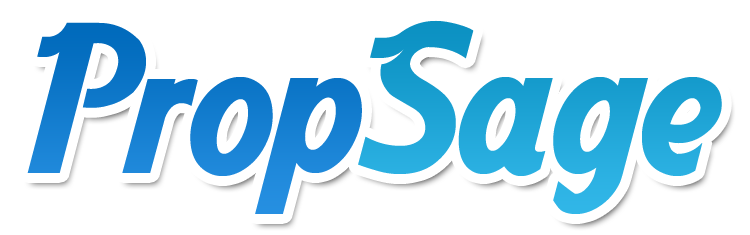
<style>
.page{position:relative;width:750px;height:235px;background:#ffffff}
.page>*{position:absolute;margin:0}
.t1{font:200px "AardvarkCafe"}
</style>
<div class="page">
<p class="t1" style="left:27px;top:20px;width:695px;height:194px">PropSage</p>
</div>
